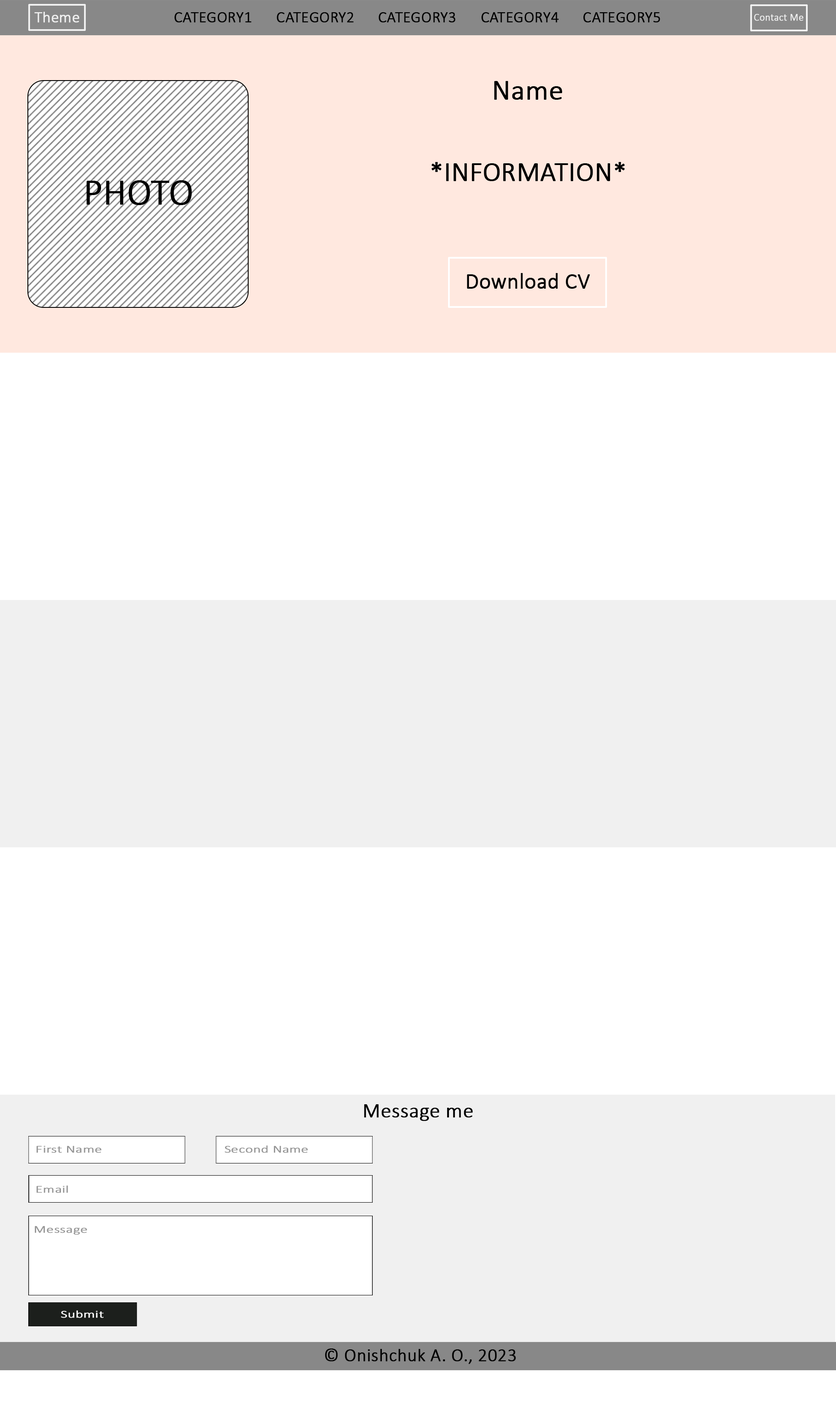
<style>
.page{position:relative;width:836px;height:1426px;background:#ffffff}
.page>*{position:absolute;margin:0}
.t1{font:15.7px "Calibri-Light";color:#f0f0f0;font-weight:bold}
.t2{font:15.7px "Calibri-Light";color:#000000;font-weight:bold}
.t3{font:10.1px "Calibri-Light";color:#f0f0f0;font-weight:bold}
.t4{font:28.8px "Calibri-Light";color:#000000;font-weight:bold}
.t5{font:27.4px "Calibri-Light";color:#000000;font-weight:bold}
.t6{font:36.9px "Calibri-Light";color:#000000;font-weight:bold}
.t7{font:22px "Calibri-Light";color:#010101;font-weight:bold}
.t8{font:20.9px "Calibri-Light";color:#000000;font-weight:bold}
.t9{font:10.5px "Calibri-Light";color:#979797;font-weight:bold;scale:1.39 1}
.t10{font:10.5px "Calibri-Light";color:#ffffff;font-weight:bold;scale:1.39 1}
.t11{font:18.4px "Calibri-Light";color:#000000;font-weight:bold}
</style>
<div class="page">
<p class="t1" style="left:34px;top:12px;width:45px;height:11px">Theme</p>
<p class="t2" style="left:174px;top:12px;width:78px;height:11px">CATEGORY1</p>
<p class="t2" style="left:277px;top:12px;width:77px;height:11px">CATEGORY2</p>
<p class="t2" style="left:378px;top:12px;width:78px;height:11px">CATEGORY3</p>
<p class="t2" style="left:481px;top:12px;width:78px;height:11px">CATEGORY4</p>
<p class="t2" style="left:583px;top:12px;width:77px;height:11px">CATEGORY5</p>
<p class="t3" style="left:754px;top:14px;width:49px;height:7px">Contact Me</p>
<p class="t4" style="left:494px;top:81px;width:68px;height:19px">Name</p>
<p class="t5" style="left:432px;top:162px;width:193px;height:19px">*INFORMATION*</p>
<p class="t6" style="left:86px;top:180px;width:106px;height:25px">PHOTO</p>
<p class="t7" style="left:467px;top:273px;width:123px;height:16px">Download CV</p>
<p class="t8" style="left:364px;top:1104px;width:109px;height:17px">Message me</p>
<p class="t9" style="left:37px;top:1146px;width:64px;height:7px">First Name</p>
<p class="t9" style="left:225px;top:1145px;width:83px;height:8px">Second Name</p>
<p class="t9" style="left:37px;top:1185px;width:31px;height:8px">Email</p>
<p class="t9" style="left:35px;top:1226px;width:52px;height:9px">Message</p>
<p class="t10" style="left:61px;top:1310px;width:43px;height:8px">Submit</p>
<p class="t11" style="left:325px;top:1349px;width:191px;height:15px">© Onishchuk A. O., 2023</p>
</div>
